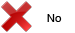
<style>
.page{position:relative;width:75px;height:33px;background:#ffffff}
.page>*{position:absolute;margin:0}
.t1{font:11px "SegoeUI";color:#000000}
</style>
<div class="page">
<p class="t1" style="left:47px;top:14px;width:15px;height:8px">No</p>
</div>
